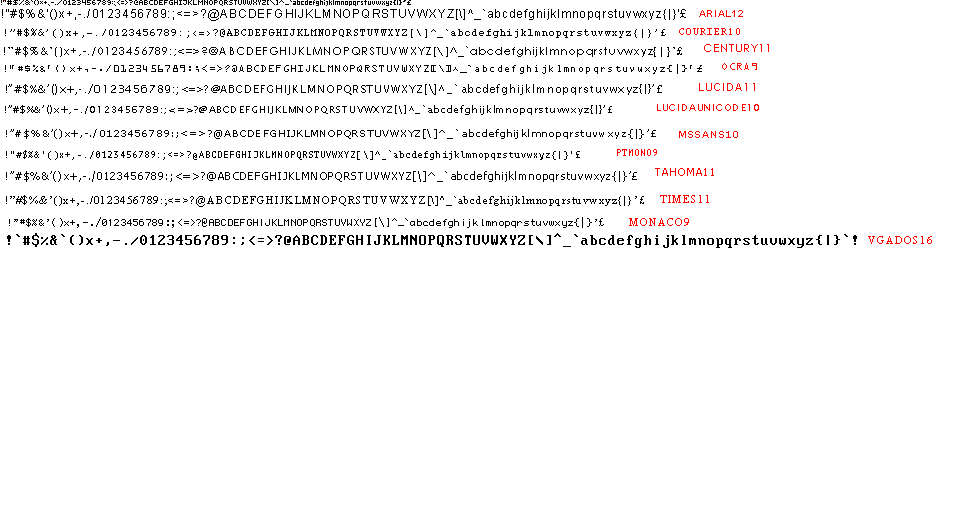
<style>
.page{position:relative;width:960px;height:512px;background:#ffffff}
.page>*{position:absolute;margin:0}
.t1{font:12px "ArialMT";letter-spacing:0.075em;color:#000000}
.t2{font:10px "ArialMT";letter-spacing:0.075em;color:#ff0000}
.t3{font:10px "Courier";letter-spacing:0.1em;color:#000000}
.t4{font:10px "Courier";letter-spacing:0.1em;color:#ff0000}
.t5{font:11px "CenturyGothic";letter-spacing:0.1em;color:#000000}
.t6{font:11px "CenturyGothic";letter-spacing:0.1em;color:#ff0000}
.t7{font:9px "OCRAStd";letter-spacing:0.1em;color:#000000}
.t8{font:9px "OCRAStd";letter-spacing:0.1em;color:#ff0000}
.t9{font:11px "LucidaSans";letter-spacing:0.075em;color:#000000}
.t10{font:11px "LucidaSans";letter-spacing:0.075em;color:#ff0000}
.t11{font:10px "LucidaSansUnicode";letter-spacing:0.075em;color:#000000}
.t12{font:10px "LucidaSansUnicode";letter-spacing:0.075em;color:#ff0000}
.t13{font:10px "MSReferenceSansSerif";letter-spacing:0.075em;color:#000000}
.t14{font:10px "MSReferenceSansSerif";letter-spacing:0.075em;color:#ff0000}
.t15{font:9px "PTMono-Regular";letter-spacing:0.075em;color:#000000}
.t16{font:9px "PTMono-Regular";letter-spacing:0.075em;color:#ff0000}
.t17{font:11px "Tahoma";letter-spacing:0.075em;color:#000000}
.t18{font:11px "Tahoma";letter-spacing:0.075em;color:#ff0000}
.t19{font:11px "TimesNewRomanPSMT";letter-spacing:0.1em;color:#000000}
.t20{font:11px "TimesNewRomanPSMT";letter-spacing:0.1em;color:#ff0000}
.t21{font:9px "Monaco";letter-spacing:0.1em;color:#000000}
.t22{font:16px "PerfectDOSVGA437";color:#000000}
</style>
<div class="page">
<p class="t1" style="left:2px;top:9px;width:684px;height:12px">!”#$%&amp;’()x+,-./0123456789:;&lt;=&gt;?@ABCDEFGHIJKLMNOPQRSTUVWXYZ[\]^_`abcdefghijklmnopqrstuvwxyz{|}’£</p>
<p class="t2" style="left:699px;top:10px;width:44px;height:7px">ARIAL12</p>
<p class="t3" style="left:5px;top:28px;width:661px;height:10px">!”#$%&amp;’()x+,-./0123456789:;&lt;=&gt;?@ABCDEFGHIJKLMNOPQRSTUVWXYZ[\]^_`abcdefghijklmnopqrstuvwxyz{|}’£</p>
<p class="t4" style="left:679px;top:28px;width:61px;height:7px">COURIER10</p>
<p class="t5" style="left:4px;top:46px;width:678px;height:11px">!”#$%&amp;’()x+,-./0123456789:;&lt;=&gt;?@ABCDEFGHIJKLMNOPQRSTUVWXYZ[\]^_`abcdefghijklmnopqrstuvwxyz{|}’£</p>
<p class="t6" style="left:704px;top:44px;width:65px;height:8px">CENTURY11</p>
<p class="t7" style="left:5px;top:64px;width:697px;height:10px">!”#$%&amp;’()x+,-./0123456789:;&lt;=&gt;?@ABCDEFGHIJKLMNOPQRSTUVWXYZ[\]^_`abcdefghijklmnopqrstuvwxyz{|}’£</p>
<p class="t8" style="left:722px;top:63px;width:35px;height:7px">OCRA9</p>
<p class="t9" style="left:6px;top:84px;width:656px;height:11px">!”#$%&amp;’()x+,-./0123456789:;&lt;=&gt;?@ABCDEFGHIJKLMNOPQRSTUVWXYZ[\]^_`abcdefghijklmnopqrstuvwxyz{|}’£</p>
<p class="t10" style="left:699px;top:83px;width:56px;height:8px">LUCIDA11</p>
<p class="t11" style="left:5px;top:105px;width:607px;height:10px">!”#$%&amp;’()x+,-./0123456789:;&lt;=&gt;?@ABCDEFGHIJKLMNOPQRSTUVWXYZ[\]^_`abcdefghijklmnopqrstuvwxyz{|}’£</p>
<p class="t12" style="left:657px;top:104px;width:102px;height:7px">LUCIDAUNICODE10</p>
<p class="t13" style="left:6px;top:129px;width:650px;height:10px">!”#$%&amp;’()x+,-./0123456789:;&lt;=&gt;?@ABCDEFGHIJKLMNOPQRSTUVWXYZ[\]^_`abcdefghijklmnopqrstuvwxyz{|}’£</p>
<p class="t14" style="left:679px;top:131px;width:59px;height:7px">MSSANS10</p>
<p class="t15" style="left:6px;top:150px;width:574px;height:10px">!”#$%&amp;’()x+,-./0123456789:;&lt;=&gt;?@ABCDEFGHIJKLMNOPQRSTUVWXYZ[\]^_`abcdefghijklmnopqrstuvwxyz{|}’£</p>
<p class="t16" style="left:617px;top:149px;width:40px;height:7px">PTMONO9</p>
<p class="t17" style="left:6px;top:171px;width:631px;height:11px">!”#$%&amp;’()x+,-./0123456789:;&lt;=&gt;?@ABCDEFGHIJKLMNOPQRSTUVWXYZ[\]^_`abcdefghijklmnopqrstuvwxyz{|}’£</p>
<p class="t18" style="left:655px;top:168px;width:59px;height:8px">TAHOMA11</p>
<p class="t19" style="left:6px;top:195px;width:638px;height:12px">!”#$%&amp;’()x+,-./0123456789:;&lt;=&gt;?@ABCDEFGHIJKLMNOPQRSTUVWXYZ[\]^_`abcdefghijklmnopqrstuvwxyz{|}’£</p>
<p class="t20" style="left:660px;top:195px;width:49px;height:8px">TIMES11</p>
<p class="t21" style="left:9px;top:217px;width:595px;height:11px">!”#$%&amp;’()x+,-./0123456789:;&lt;=&gt;?@ABCDEFGHIJKLMNOPQRSTUVWXYZ[\]^_`abcdefghijklmnopqrstuvwxyz{|}’£</p>
<p class="t20" style="left:629px;top:218px;width:60px;height:8px">MONACO9</p>
<p class="t22" style="left:7px;top:233px;width:850px;height:15px">!`#$%&amp;`()x+,-./0123456789:;&lt;=&gt;?@ABCDEFGHIJKLMNOPQRSTUVWXYZ[\]^_`abcdefghijklmnopqrstuvwxyz{|}`!</p>
<p class="t20" style="left:868px;top:236px;width:64px;height:8px">VGADOS16</p>
</div>
